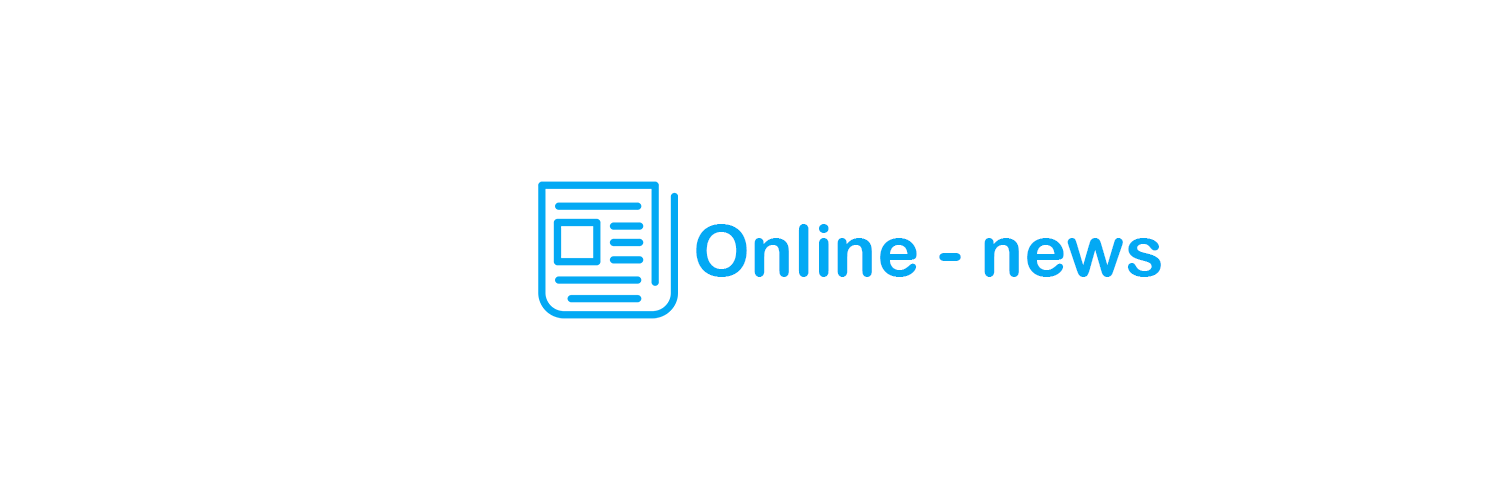
<style>
.page{position:relative;width:1500px;height:500px;background:#ffffff}
.page>*{position:absolute;margin:0}
.t1{font:72.4px "ArialRoundedMTBold";color:#03a9f4}
</style>
<div class="page">
<p class="t1" style="left:696px;top:224px;width:465px;height:53px">Online - news</p>
</div>
